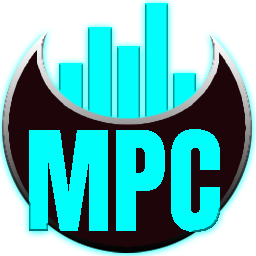
<style>
.page{position:relative;width:256px;height:256px;background:#00fffc}
.page>*{position:absolute;margin:0}
.t1{font:116.7px "AntonSC-Regular";color:#00fffc}
</style>
<div class="page">
<p class="t1" style="left:29px;top:129px;width:191px;height:103px">MPC</p>
</div>
